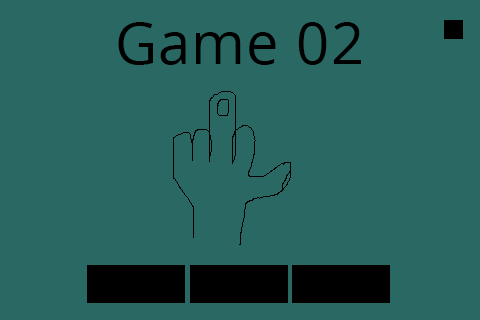
<style>
.page{position:relative;width:480px;height:320px;background:#2a6863}
.page>*{position:absolute;margin:0}
.t1{font:58.3px "OpenSans";letter-spacing:0.02em;color:#000000}
</style>
<div class="page">
<p class="t1" style="left:118px;top:22px;width:243px;height:43px">Game 02</p>
</div>
